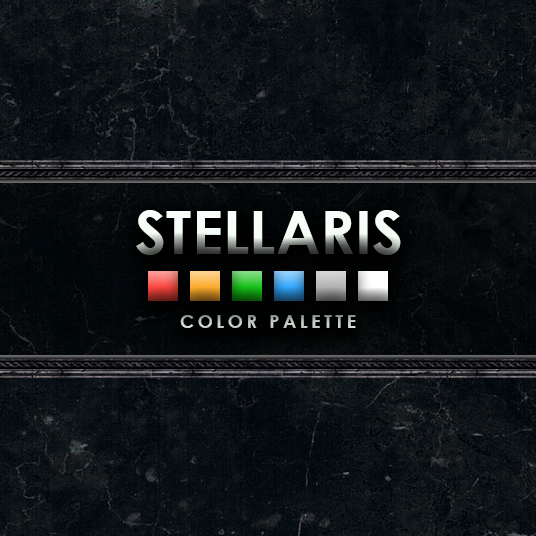
<style>
.page{position:relative;width:536px;height:536px}
.page>*{position:absolute;margin:0}
.t1{font:60px "CenturyGothic-Bold"}
.t2{font:18px "CenturyGothic-Bold";letter-spacing:0.2em}
</style>
<div class="page">
<p class="t1" style="left:136px;top:210px;width:265px;height:45px">STELLARIS</p>
<p class="t2" style="left:180px;top:315px;width:176px;height:13px">COLOR PALETTE</p>
</div>
